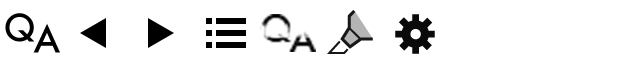
<style>
.page{position:relative;width:640px;height:64px;background:#ffffff}
.page>*{position:absolute;margin:0}
.t1{font:36px "Futura-Medium";letter-spacing:0.05em;color:#000000}
</style>
<div class="page">
<p class="t1" style="left:5px;top:13px;width:30px;height:29px">Q</p>
<p class="t1" style="left:33px;top:23px;width:27px;height:30px">A</p>
</div>
